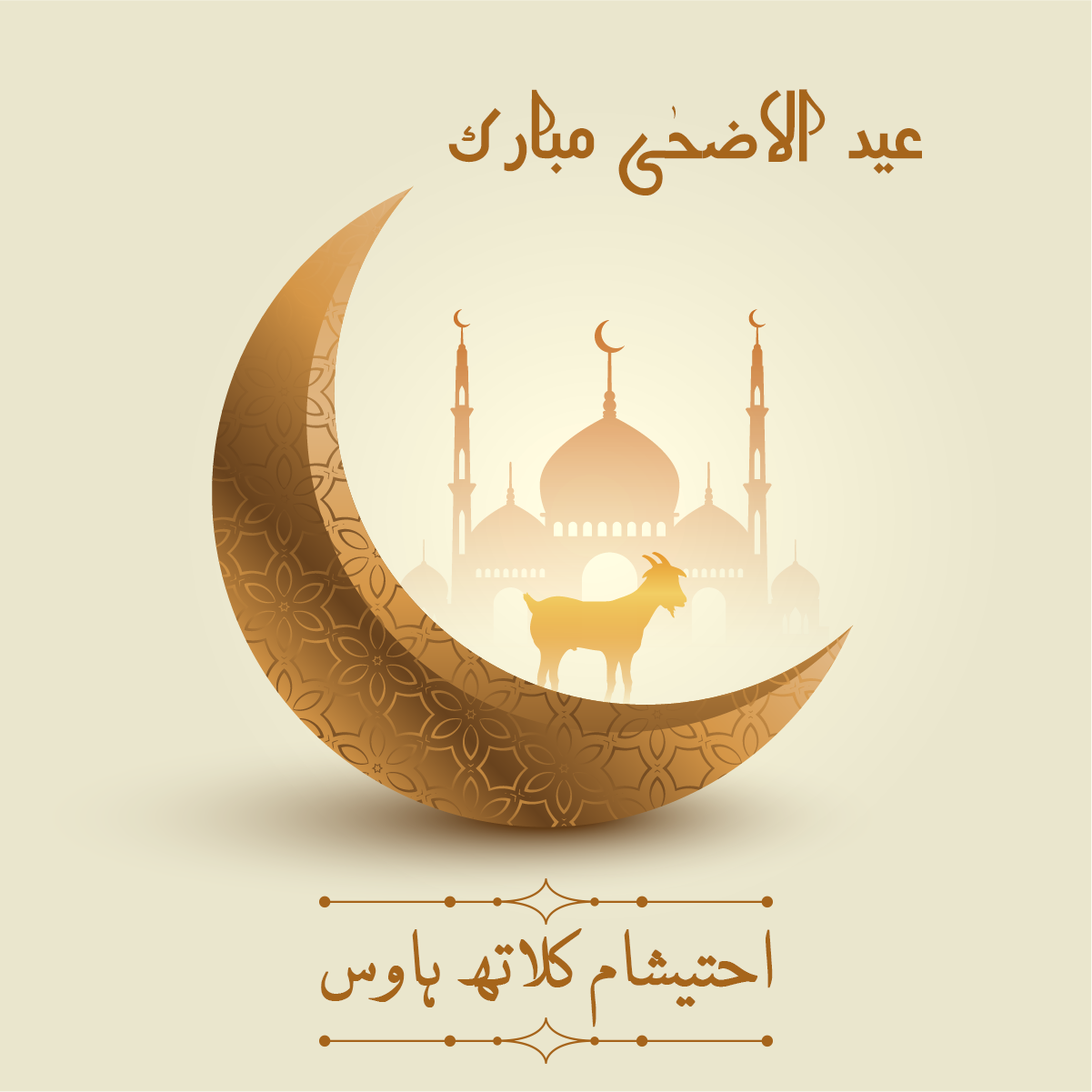
<style>
.page{position:relative;width:1092px;height:1092px;background:#eae6cd}
.page>*{position:absolute;margin:0}
.t1{font:68.2px "AlQalamIshtiaq";color:#a6651b}
.t2{font:58.7px "NafeesNaskhv2.01";color:#a6651b;font-weight:bold}
</style>
<div class="page">
<p class="t1" style="left:448px;top:89px;width:474px;height:106px">عيد الاضحٰی مبارک</p>
<p class="t2" style="left:321px;top:928px;width:452px;height:99px">احتیشام کلاتھ ہاوس</p>
</div>
